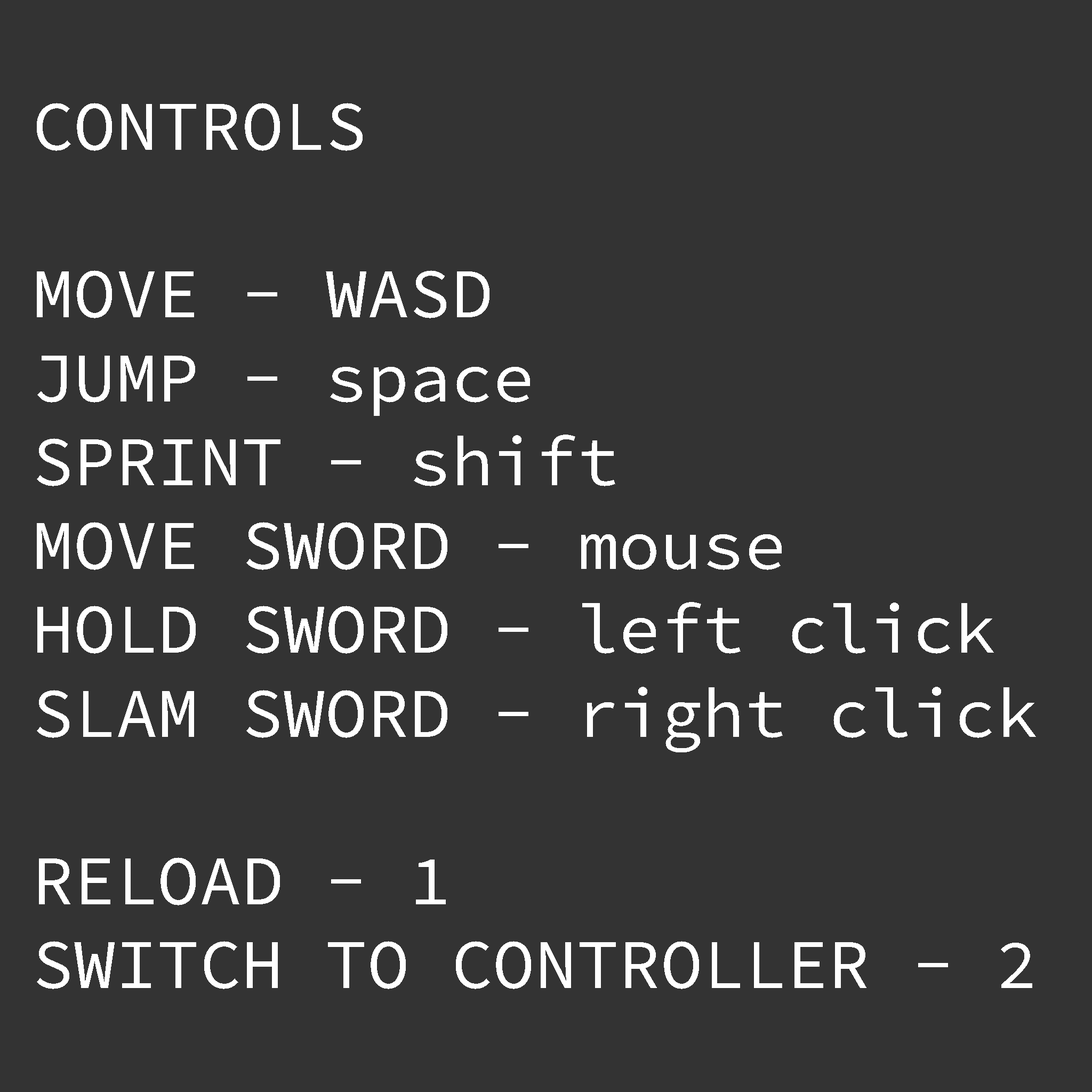
<style>
.page{position:relative;width:1092px;height:1092px;background:#333333}
.page>*{position:absolute;margin:0}
.t1{font:69.9px "SourceCodeVariable-Roman";color:#ffffff}
</style>
<div class="page">
<p class="t1" style="left:37px;top:103px;width:999px;height:886px">CONTROLS<br><br>MOVE - WASD<br>JUMP - space<br>SPRINT - shift<br>MOVE SWORD - mouse<br>HOLD SWORD - left click<br>SLAM SWORD - right click<br><br>RELOAD - 1<br>SWITCH TO CONTROLLER - 2</p>
</div>
